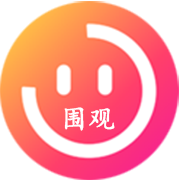
<style>
.page{position:relative;width:180px;height:180px;background:#ffffff}
.page>*{position:absolute;margin:0}
.t1{font:27px "KaiTi";letter-spacing:0.006em;color:#ffffff;font-weight:bold}
</style>
<div class="page">
<p class="t1" style="left:64px;top:107px;width:51px;height:24px">围观</p>
</div>
